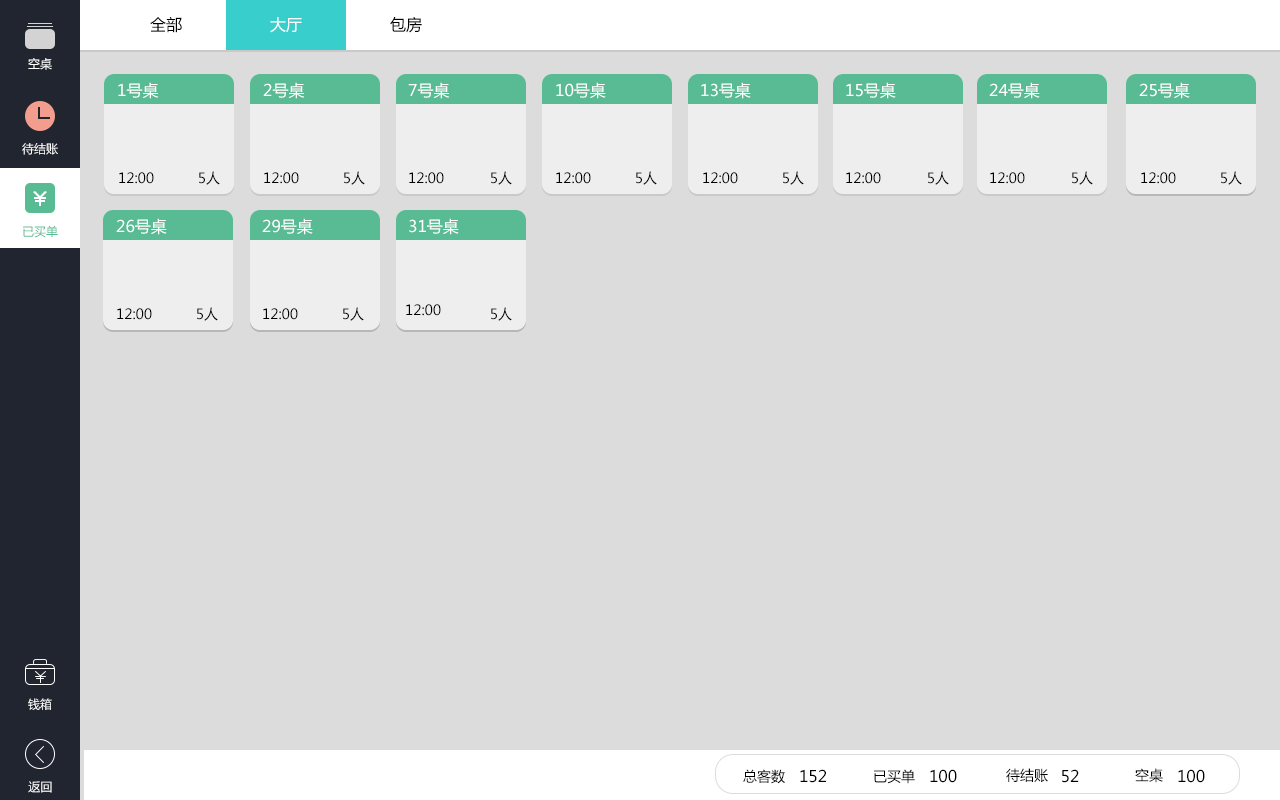
<style>
.page{position:relative;width:1280px;height:800px;background:#dcdcdc}
.page>*{position:absolute;margin:0}
.t1{font:16px "MicrosoftYaHei";color:#000000}
.t2{font:16px "MicrosoftYaHei";color:#ffffff}
.t3{font:12px "MicrosoftYaHei";color:#ffffff}
.t4{font:14px "MicrosoftYaHei";color:#000000}
.t5{font:12px "MicrosoftYaHei";color:#58bb93}
</style>
<div class="page">
<p class="t1" style="left:150px;top:17px;width:32px;height:16px">全部</p>
<p class="t2" style="left:270px;top:17px;width:32px;height:16px">大厅</p>
<p class="t1" style="left:390px;top:17px;width:32px;height:16px">包房</p>
<p class="t3" style="left:28px;top:58px;width:24px;height:12px">空桌</p>
<p class="t2" style="left:118px;top:82px;width:41px;height:17px">1号桌</p>
<p class="t2" style="left:263px;top:82px;width:42px;height:17px">2号桌</p>
<p class="t2" style="left:408px;top:82px;width:42px;height:17px">7号桌</p>
<p class="t2" style="left:556px;top:82px;width:50px;height:17px">10号桌</p>
<p class="t2" style="left:701px;top:82px;width:50px;height:17px">13号桌</p>
<p class="t2" style="left:846px;top:82px;width:50px;height:17px">15号桌</p>
<p class="t2" style="left:989px;top:82px;width:51px;height:17px">24号桌</p>
<p class="t2" style="left:1139px;top:82px;width:51px;height:17px">25号桌</p>
<p class="t3" style="left:22px;top:143px;width:36px;height:12px">待结账</p>
<p class="t4" style="left:119px;top:172px;width:35px;height:12px">12:00</p>
<p class="t4" style="left:199px;top:171px;width:21px;height:14px">5人</p>
<p class="t4" style="left:264px;top:172px;width:35px;height:12px">12:00</p>
<p class="t4" style="left:344px;top:171px;width:21px;height:14px">5人</p>
<p class="t4" style="left:409px;top:172px;width:35px;height:12px">12:00</p>
<p class="t4" style="left:491px;top:171px;width:21px;height:14px">5人</p>
<p class="t4" style="left:556px;top:172px;width:35px;height:12px">12:00</p>
<p class="t4" style="left:636px;top:171px;width:21px;height:14px">5人</p>
<p class="t4" style="left:703px;top:172px;width:35px;height:12px">12:00</p>
<p class="t4" style="left:783px;top:171px;width:21px;height:14px">5人</p>
<p class="t4" style="left:846px;top:172px;width:35px;height:12px">12:00</p>
<p class="t4" style="left:928px;top:171px;width:21px;height:14px">5人</p>
<p class="t4" style="left:990px;top:172px;width:35px;height:12px">12:00</p>
<p class="t4" style="left:1072px;top:171px;width:21px;height:14px">5人</p>
<p class="t4" style="left:1141px;top:172px;width:35px;height:12px">12:00</p>
<p class="t4" style="left:1221px;top:171px;width:21px;height:14px">5人</p>
<p class="t2" style="left:116px;top:218px;width:51px;height:17px">26号桌</p>
<p class="t2" style="left:262px;top:218px;width:51px;height:17px">29号桌</p>
<p class="t2" style="left:409px;top:218px;width:50px;height:17px">31号桌</p>
<p class="t5" style="left:23px;top:225px;width:35px;height:13px">已买单</p>
<p class="t4" style="left:406px;top:304px;width:35px;height:12px">12:00</p>
<p class="t4" style="left:117px;top:308px;width:35px;height:12px">12:00</p>
<p class="t4" style="left:197px;top:307px;width:21px;height:14px">5人</p>
<p class="t4" style="left:263px;top:308px;width:35px;height:12px">12:00</p>
<p class="t4" style="left:343px;top:307px;width:21px;height:14px">5人</p>
<p class="t4" style="left:491px;top:307px;width:21px;height:14px">5人</p>
<p class="t3" style="left:28px;top:698px;width:24px;height:12px">钱箱</p>
<p class="t4" style="left:743px;top:769px;width:42px;height:15px">总客数</p>
<p class="t1" style="left:800px;top:769px;width:26px;height:14px">152</p>
<p class="t4" style="left:874px;top:769px;width:41px;height:15px">已买单</p>
<p class="t1" style="left:930px;top:769px;width:27px;height:14px">100</p>
<p class="t4" style="left:1006px;top:768px;width:42px;height:14px">待结账</p>
<p class="t1" style="left:1062px;top:769px;width:17px;height:14px">52</p>
<p class="t4" style="left:1135px;top:768px;width:28px;height:15px">空桌</p>
<p class="t1" style="left:1178px;top:769px;width:27px;height:14px">100</p>
<p class="t3" style="left:28px;top:781px;width:24px;height:12px">返回</p>
</div>
